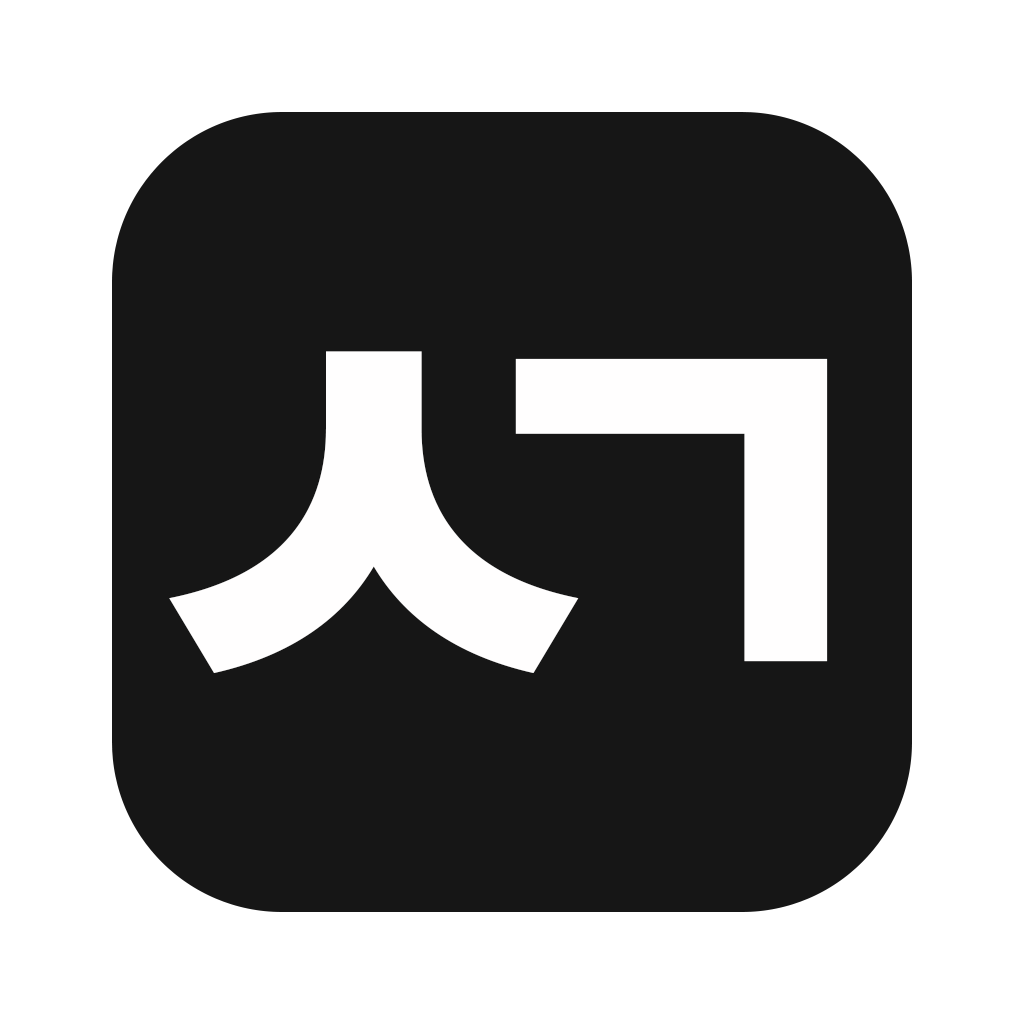
<style>
.page{position:relative;width:1024px;height:1024px;background:#161616}
.page>*{position:absolute;margin:0}
.t1{font:589px "NotoSansCJKkr-Black";letter-spacing:-0.36em;color:#fffefe}
.t2{font:589px "NotoSansCJKkr-Black";letter-spacing:-0.36em;color:#fffefe;scale:0.88 1}
</style>
<div class="page">
<p class="t1" style="left:169px;top:351px;width:659px;height:322px">ㅅ<span class="t2">ㄱ</span></p>
</div>
